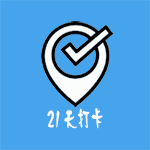
<style>
.page{position:relative;width:150px;height:150px;background:#45a4eb}
.page>*{position:absolute;margin:0}
.t1{font:22.5px "Pop3EG-Extra-GB";color:#fcfcfc;scale:0.6 1}
</style>
<div class="page">
<p class="t1" style="left:47px;top:108px;width:56px;height:21px;rotate:-2deg">21天打卡</p>
</div>
